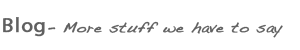
<style>
.page{position:relative;width:300px;height:50px;background:#ffffff}
.page>*{position:absolute;margin:0}
.t1{font:14.6px "Handwriting-Dakota";letter-spacing:0.04em;color:#606060;font-weight:bold}
.t2{font:20.8px "MyriadPro-Regular";letter-spacing:0.04em;color:#606060;font-weight:bold}
.t3{font:14.6px "Handwriting-Dakota";letter-spacing:0.04em;color:#606060;font-weight:bold;scale:0.96 1}
</style>
<div class="page">
<p class="t1" style="left:3px;top:17px;width:280px;height:21px"><span class="t2">Blog</span><span class="t3">- </span>More stuff we have to say</p>
</div>
